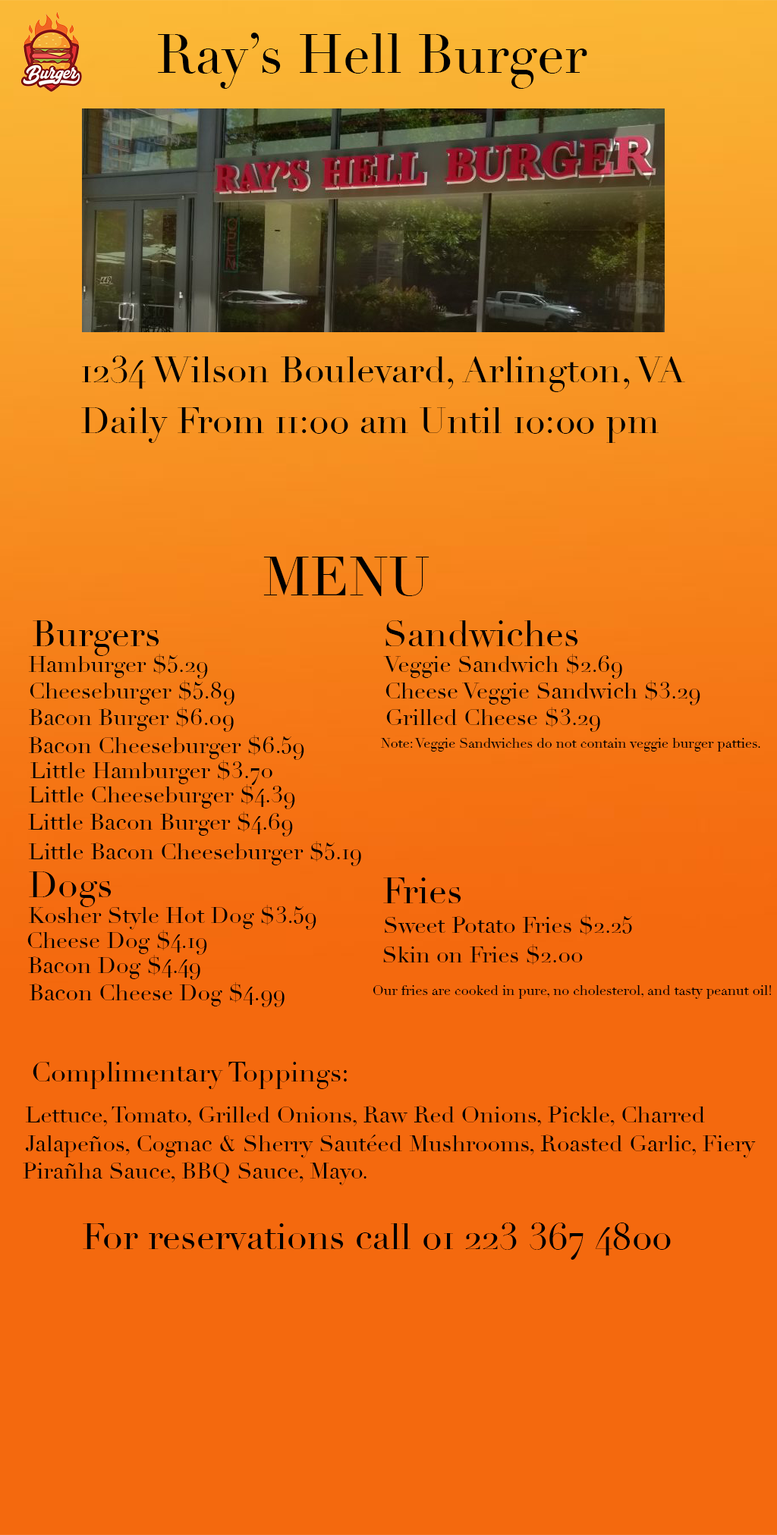
<style>
.page{position:relative;width:777px;height:1535px;background:#f4690e}
.page>*{position:absolute;margin:0}
.t1{font:54.6px "Didot";color:#000000}
.t2{font:36.4px "Didot";color:#000000}
.t3{font:22.8px "Didot";color:#000000}
.t4{font:13.7px "Didot";color:#000000}
.t5{font:27.3px "Didot";color:#000000}
</style>
<div class="page">
<p class="t1" style="left:158px;top:33px;width:429px;height:56px">Ray’s Hell Burger</p>
<p class="t2" style="left:82px;top:356px;width:603px;height:36px">1234 Wilson Boulevard, Arlington, VA</p>
<p class="t2" style="left:81px;top:407px;width:577px;height:36px">Daily From 11:00 am Until 10:00 pm</p>
<p class="t1" style="left:263px;top:557px;width:166px;height:39px">MENU</p>
<p class="t2" style="left:33px;top:620px;width:126px;height:36px">Burgers</p>
<p class="t2" style="left:385px;top:620px;width:193px;height:28px">Sandwiches</p>
<p class="t3" style="left:28px;top:654px;width:180px;height:25px">Hamburger $5.29</p>
<p class="t3" style="left:383px;top:654px;width:239px;height:25px">Veggie Sandwich $2.69</p>
<p class="t3" style="left:30px;top:680px;width:204px;height:25px">Cheeseburger $5.89</p>
<p class="t3" style="left:385px;top:680px;width:315px;height:25px">Cheese Veggie Sandwich $3.29</p>
<p class="t3" style="left:29px;top:707px;width:205px;height:25px">Bacon Burger $6.09</p>
<p class="t3" style="left:386px;top:707px;width:214px;height:25px">Grilled Cheese $3.29</p>
<p class="t3" style="left:28px;top:735px;width:276px;height:25px">Bacon Cheeseburger $6.59</p>
<p class="t4" style="left:381px;top:738px;width:379px;height:14px">Note: Veggie Sandwiches do not contain veggie burger patties.</p>
<p class="t3" style="left:30px;top:760px;width:242px;height:25px">Little Hamburger $3.70</p>
<p class="t3" style="left:29px;top:784px;width:266px;height:25px">Little Cheeseburger $4.39</p>
<p class="t3" style="left:28px;top:812px;width:265px;height:25px">Little Bacon Burger $4.69</p>
<p class="t3" style="left:28px;top:841px;width:333px;height:25px">Little Bacon Cheeseburger $5.19</p>
<p class="t2" style="left:29px;top:872px;width:83px;height:35px">Dogs</p>
<p class="t2" style="left:383px;top:878px;width:78px;height:25px">Fries</p>
<p class="t3" style="left:28px;top:905px;width:288px;height:25px">Kosher Style Hot Dog $3.59</p>
<p class="t3" style="left:385px;top:915px;width:247px;height:20px">Sweet Potato Fries $2.25</p>
<p class="t3" style="left:27px;top:930px;width:180px;height:25px">Cheese Dog $4.19</p>
<p class="t3" style="left:383px;top:944px;width:200px;height:21px">Skin on Fries $2.00</p>
<p class="t3" style="left:28px;top:955px;width:172px;height:25px">Bacon Dog $4.49</p>
<p class="t3" style="left:29px;top:982px;width:255px;height:25px">Bacon Cheese Dog $4.99</p>
<p class="t4" style="left:372px;top:985px;width:399px;height:14px">Our fries are cooked in pure, no cholesterol, and tasty peanut oil!</p>
<p class="t5" style="left:33px;top:1062px;width:314px;height:27px">Complimentary Toppings:</p>
<p class="t3" style="left:25px;top:1106px;width:680px;height:20px">Lettuce, Tomato, Grilled Onions, Raw Red Onions, Pickle, Charred</p>
<p class="t3" style="left:25px;top:1135px;width:730px;height:23px">Jalapeños, Cognac &amp; Sherry Sautéed Mushrooms, Roasted Garlic, Fiery</p>
<p class="t3" style="left:23px;top:1162px;width:343px;height:24px">Pirañha Sauce, BBQ Sauce, Mayo.</p>
<p class="t2" style="left:83px;top:1223px;width:588px;height:37px">For reservations call 01 223 367 4800</p>
</div>
